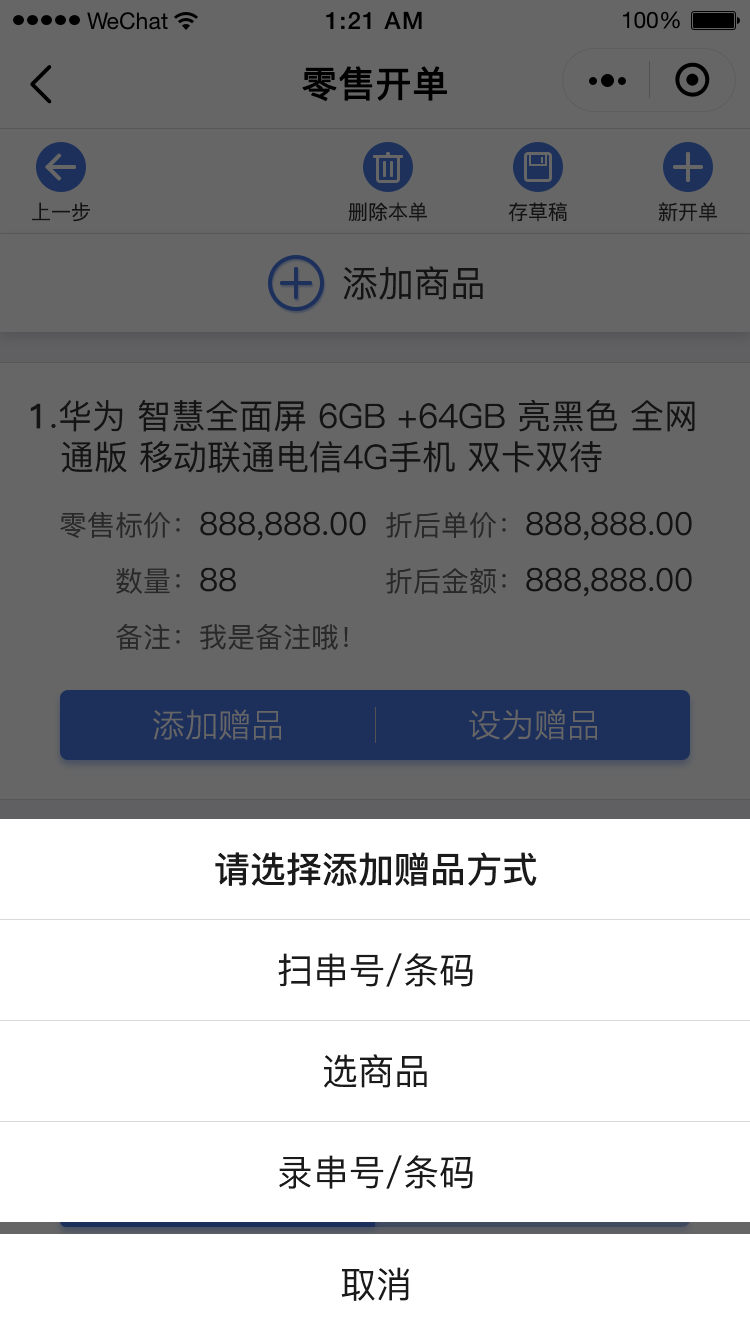
<style>
.page{position:relative;width:750px;height:1334px;background:#666666}
.page>*{position:absolute;margin:0}
.t1{font:36px "PingFang-SC-Medium";color:#000000;font-weight:bold}
.t2{font:20px "PingFang-SC-Medium";color:#141414}
.t3{font:36px "PingFang-SC-Medium";color:#141414}
.t4{font:34px "PingFang-SC-Medium";color:#141414}
.t5{font:34px "PingFang-SC-Medium";color:#141414;font-weight:bold}
.t6{font:32px "PingFang-SC-Medium"}
.t7{font:28px "PingFang-SC-Medium"}
.t8{font:28px "PingFang-SC-Medium";color:#666666}
.t9{font:32px "PingFang-SC-Medium";color:#333333}
.t10{font:28px "PingFang-SC-Medium";color:#292929}
.t11{font:32px "STHeitiSC-Medium";color:#666666}
.t12{font:36px "PingFang-SC-Bold";color:#1a1a1a}
.t13{font:36px "PingFang-SC-Medium";color:#1a1a1a}
</style>
<div class="page">
<p class="t1" style="left:302px;top:66px;width:145px;height:36px">零售开单</p>
<p class="t2" style="left:32px;top:202px;width:58px;height:20px">上一步</p>
<p class="t2" style="left:348px;top:202px;width:79px;height:20px">删除本单</p>
<p class="t2" style="left:508px;top:202px;width:59px;height:20px">存草稿</p>
<p class="t2" style="left:658px;top:202px;width:59px;height:20px">新开单</p>
<p class="t3" style="left:343px;top:266px;width:140px;height:34px">添加商品</p>
<p class="t4" style="left:30px;top:400px;width:665px;height:73px"><span class="t5">1</span>.华为 智慧全面屏 6GB +64GB 亮黑色 全网<br>   通版 移动联通电信4G手机 双卡双待</p>
<p class="t6" style="left:60px;top:511px;width:306px;height:30px"><span class="t7">零售标价：</span>888,888.00</p>
<p class="t6" style="left:386px;top:511px;width:306px;height:30px"><span class="t7">折后单价：</span>888,888.00</p>
<p class="t8" style="left:116px;top:567px;width:120px;height:27px">数量：<span class="t9">88</span></p>
<p class="t6" style="left:386px;top:567px;width:306px;height:30px"><span class="t7">折后金额：</span>888,888.00</p>
<p class="t10" style="left:116px;top:623px;width:232px;height:27px">备注：我是备注哦！</p>
<p class="t11" style="left:153px;top:709px;width:128px;height:31px">添加赠品</p>
<p class="t11" style="left:469px;top:709px;width:128px;height:31px">设为赠品</p>
<p class="t12" style="left:215px;top:852px;width:322px;height:34px">请选择添加赠品方式</p>
<p class="t13" style="left:278px;top:953px;width:195px;height:34px">扫串号/条码</p>
<p class="t13" style="left:324px;top:1054px;width:103px;height:34px">选商品</p>
<p class="t13" style="left:279px;top:1155px;width:194px;height:34px">录串号/条码</p>
<p class="t13" style="left:341px;top:1267px;width:69px;height:34px">取消</p>
</div>
